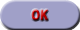
<style>
.page{position:relative;width:80px;height:30px;background:#a0a0c8}
.page>*{position:absolute;margin:0}
.t1{font:14px "GothicXB-HM"}
</style>
<div class="page">
<p class="t1" style="left:31px;top:9px;width:17px;height:12px">OK</p>
</div>
